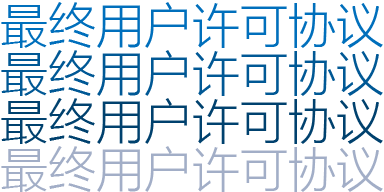
<style>
.page{position:relative;width:384px;height:192px;background:#ffffff}
.page>*{position:absolute;margin:0}
.t1{font:48px "MicrosoftYaHeiLight";color:#006fbc}
.t2{font:48px "MicrosoftYaHeiLight";color:#005895}
.t3{font:48px "MicrosoftYaHeiLight";color:#00416e}
.t4{font:48px "MicrosoftYaHeiLight";color:#a2aec7}
</style>
<div class="page">
<p class="t1" style="left:1px;top:2px;width:382px;height:46px">最终用户许可协议</p>
<p class="t2" style="left:1px;top:50px;width:382px;height:46px">最终用户许可协议</p>
<p class="t3" style="left:1px;top:98px;width:382px;height:46px">最终用户许可协议</p>
<p class="t4" style="left:1px;top:146px;width:382px;height:46px">最终用户许可协议</p>
</div>
